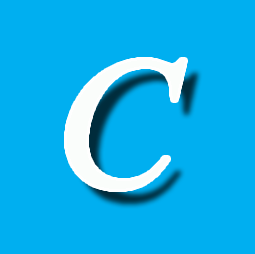
<style>
.page{position:relative;width:255px;height:254px;background:#00aff0}
.page>*{position:absolute;margin:0}
.t1{font:230px "Vijaya";color:#fafdfb}
</style>
<div class="page">
<p class="t1" style="left:67px;top:60px;width:118px;height:129px">C</p>
</div>
